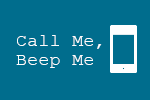
<style>
.page{position:relative;width:150px;height:100px;background:#006d8d}
.page>*{position:absolute;margin:0}
.t1{font:18px/19px "CourierNewPSMT";letter-spacing:0.025em;color:#fdfdfd}
</style>
<div class="page">
<p class="t1" style="left:16px;top:35px;width:86px;height:33px">Call Me,<br>Beep Me</p>
</div>
